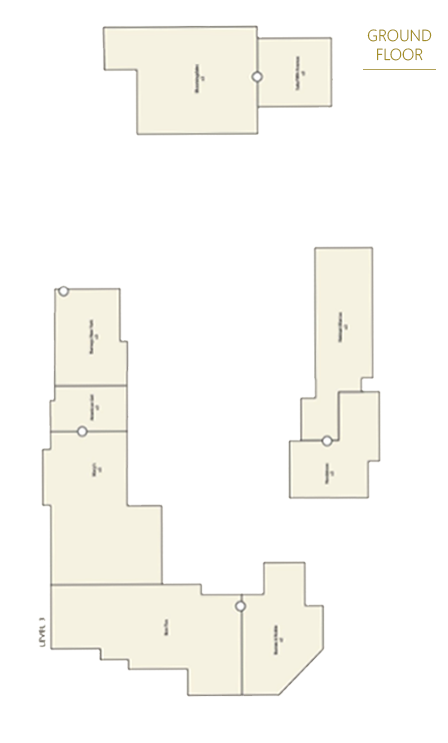
<style>
.page{position:relative;width:448px;height:743px;background:#ffffff}
.page>*{position:absolute;margin:0}
.t1{font:16px "SegoeUI-Light";color:#9c8502}
</style>
<div class="page">
<p class="t1" style="left:367px;top:29px;width:65px;height:32px;text-align:center">GROUND<br>FLOOR</p>
</div>
